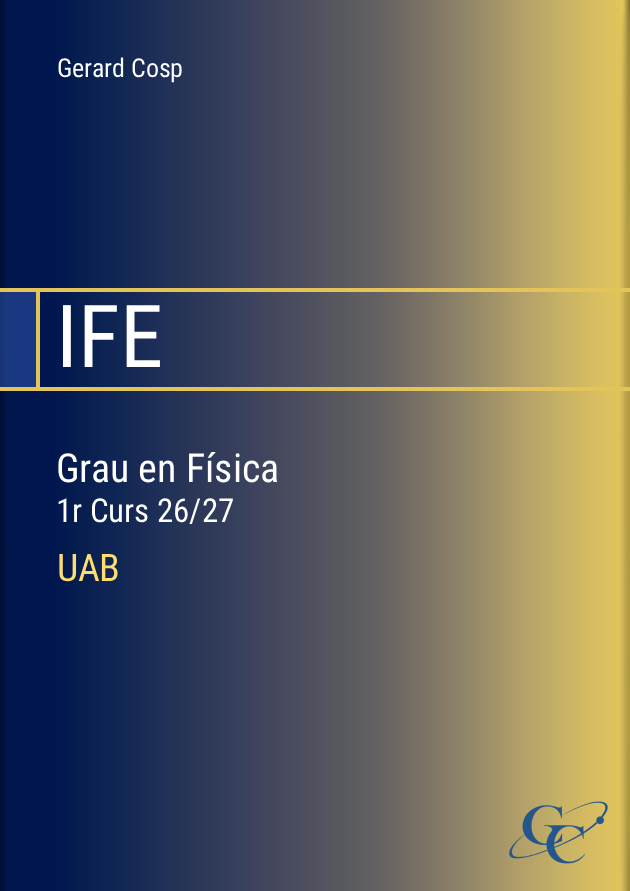
<style>
.page{position:relative;width:630px;height:891px}
.page>*{position:absolute;margin:0}
.t1{font:26px "RobotoCondensed-Regular";color:#ffffff}
.t2{font:87px "RobotoCondensed-Regular";color:#ffffff}
.t3{font:40px "RobotoCondensed-Regular";color:#ffffff}
.t4{font:33px "RobotoCondensed-Regular";color:#ffffff}
.t5{font:38px "RobotoCondensed-Regular";color:#ffdd6e}
</style>
<div class="page">
<p class="t1" style="left:58px;top:57px;width:124px;height:26px">Gerard Cosp</p>
<p class="t2" style="left:63px;top:305px;width:97px;height:62px">IFE</p>
<p class="t3" style="left:58px;top:452px;width:220px;height:73px">Grau en Física<br><span class="t4">1r Curs 26/27</span></p>
<p class="t5" style="left:59px;top:553px;width:59px;height:29px">UAB</p>
</div>
